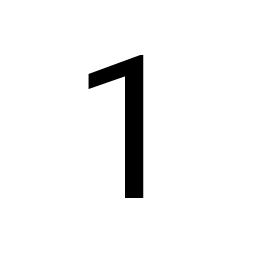
<style>
.page{position:relative;width:256px;height:256px;background:#ffffff}
.page>*{position:absolute;margin:0}
.t1{font:200px "Roboto-Regular";color:#000000}
</style>
<div class="page">
<p class="t1" style="left:88px;top:55px;width:56px;height:143px">1</p>
</div>
